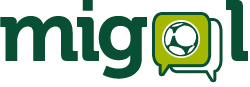
<style>
.page{position:relative;width:250px;height:87px;background:#ffffff}
.page>*{position:absolute;margin:0}
.t1{font:145.8px "Museo-700";letter-spacing:-0.075em;color:#084f33;font-weight:bold}
.t2{font:58.3px "Soccer-Dance-Regular";letter-spacing:-0.075em;color:#084f33;font-weight:bold}
</style>
<div class="page">
<p class="t1" style="left:0px;top:2px;width:147px;height:79px">mig</p>
<p class="t1" style="left:0px;top:0px;width:147px;height:79px">mig</p>
<p class="t1" style="left:226px;top:2px;width:22px;height:61px">l</p>
<p class="t1" style="left:226px;top:0px;width:22px;height:61px">l</p>
<p class="t2" style="left:164px;top:22px;width:35px;height:35px">x</p>
</div>
